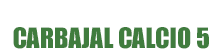
<style>
.page{position:relative;width:222px;height:54px;background:#ffffff}
.page>*{position:absolute;margin:0}
.t1{font:26px "Impact";color:#407c3e}
</style>
<div class="page">
<p class="t1" style="left:13px;top:27px;width:196px;height:22px">CARBAJAL CALCIO 5</p>
</div>
